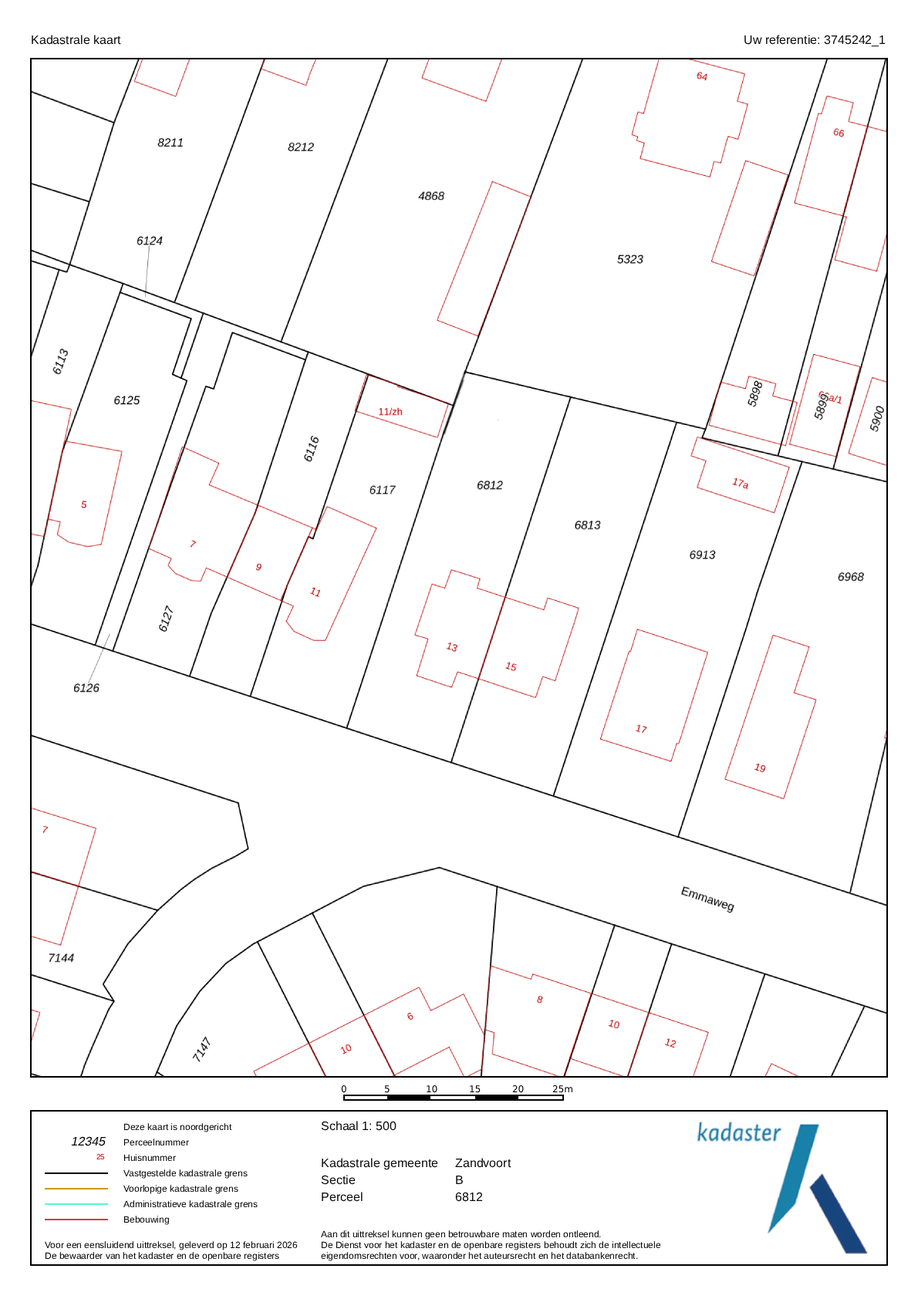
<style>
.page{position:relative;width:918px;height:1299px;background:#ffffff}
.page>*{position:absolute;margin:0}
.t1{font:12.3px "LiberationSans";color:#0a0a0a}
.t2{font:9.3px/15.4px "LiberationSans";color:#000000}
.t3{font:9.3px/10.8px "LiberationSans";color:#000000}
.t4{font:12.6px "LiberationSans";color:#000000}
.t5{font:7.7px "LiberationSans"}
.t6{font:12.3px/15.4px "LiberationSans";color:#0a0a0a}
.t7{font:12.3px/17px "LiberationSans";color:#0a0a0a}
.t8{font:9.3px "LiberationSans";color:#000000}
.t9{font:9.3px/17px "LiberationSans";color:#000000}
</style>
<div class="page">
<p class="t1" style="left:32px;top:35px;width:89px;height:10px">Kadastrale kaart</p>
<p class="t1" style="left:744px;top:35px;width:142px;height:12px">Uw referentie: 3745242_1</p>
<p class="t1" style="left:321px;top:1121px;width:75px;height:10px">Schaal 1: 500</p>
<p class="t2" style="left:123px;top:1123px;width:135px;height:102px"><span class="t3">Deze kaart is noordgericht</span><br>Perceelnummer<br>Huisnummer<br>Vastgestelde kadastrale grens<br>Voorlopige kadastrale grens<br>Administratieve kadastrale grens<br>Bebouwing</p>
<p class="t4" style="left:71px;top:1136px;width:35px;height:10px">12345</p>
<p class="t5" style="left:96px;top:1154px;width:9px;height:6px">25</p>
<p class="t6" style="left:321px;top:1158px;width:117px;height:44px">Kadastrale gemeente<span class="t7"><br>Sectie<br>Perceel</span></p>
<p class="t7" style="left:455px;top:1158px;width:56px;height:44px">Zandvoort<br>B<br>6812</p>
<p class="t8" style="left:45px;top:1241px;width:253px;height:20px">Voor een eensluidend uittreksel, geleverd op 12 februari 2026<span class="t3"><br>De bewaarder van het kadaster en de openbare registers</span></p>
<p class="t3" style="left:321px;top:1230px;width:340px;height:31px"><span class="t9">Aan dit uittreksel kunnen geen betrouwbare maten worden ontleend.</span><br>De Dienst voor het kadaster en de openbare registers behoudt zich de intellectuele<br>eigendomsrechten voor, waaronder het auteursrecht en het databankenrecht.</p>
</div>
